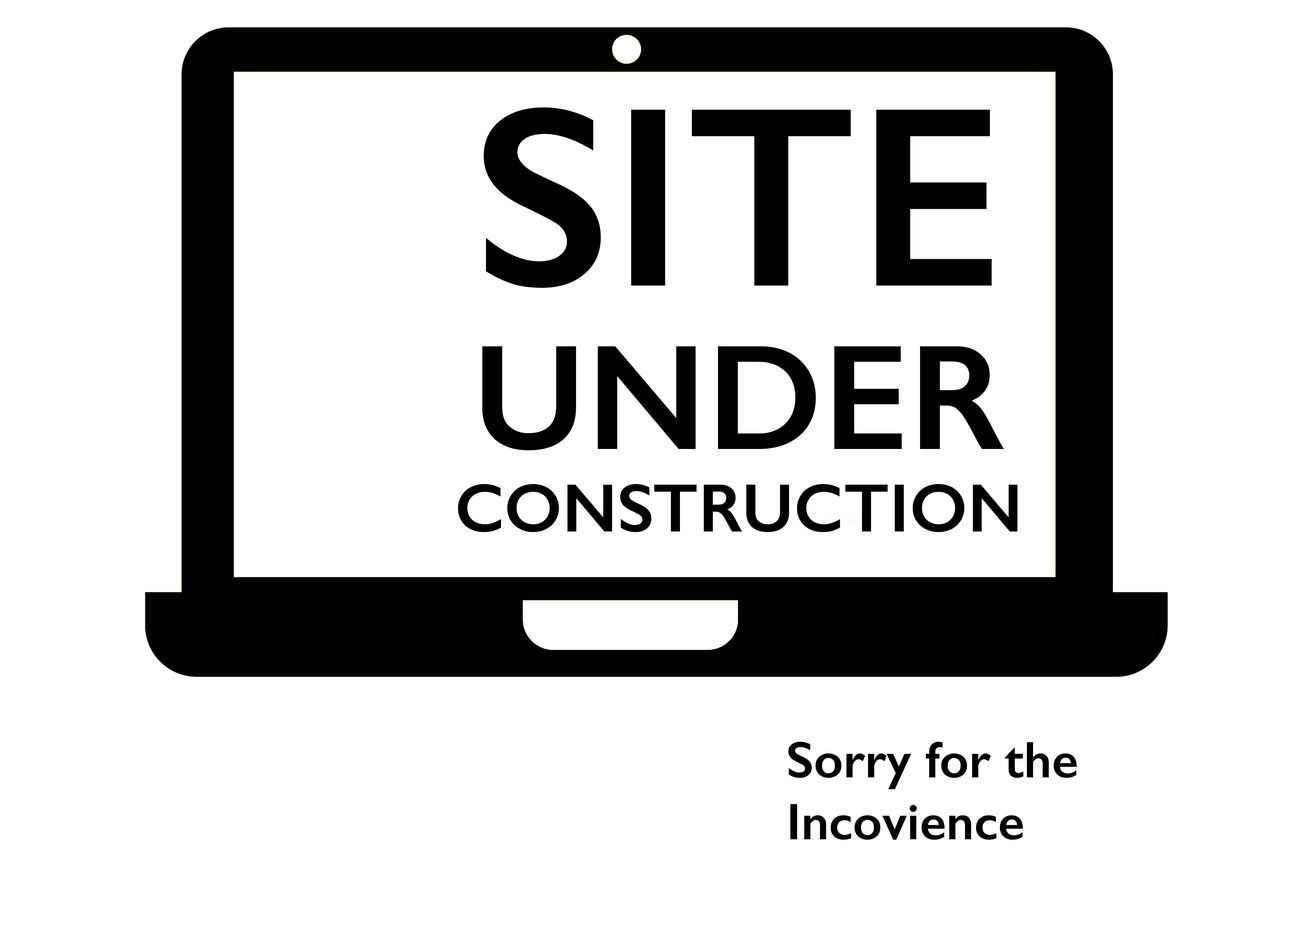
<style>
.page{position:relative;width:1289px;height:925px;background:#ffffff}
.page>*{position:absolute;margin:0}
.t1{font:68.8px "GillSans-SemiBold";color:#000000}
.t2{font:257.8px/163.3px "GillSans-SemiBold";color:#000000}
.t3{font:150.4px/163.3px "GillSans-SemiBold";color:#000000}
.t4{font:51.6px "GillSans-SemiBold";color:#000000}
</style>
<div class="page">
<p class="t1" style="left:458px;top:107px;width:560px;height:425px;text-align:center"><span class="t2">SITE<br></span><span class="t3">UNDER<br></span>CONSTRUCTION</p>
<p class="t4" style="left:788px;top:742px;width:289px;height:98px">Sorry for the Incovience</p>
</div>
